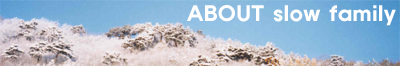
<style>
.page{position:relative;width:400px;height:66px}
.page>*{position:absolute;margin:0}
.t1{font:20px "ExpoB-HM";letter-spacing:0.025em;color:#ffffff}
</style>
<div class="page">
<p class="t1" style="left:187px;top:5px;width:209px;height:21px">ABOUT slow family</p>
</div>
